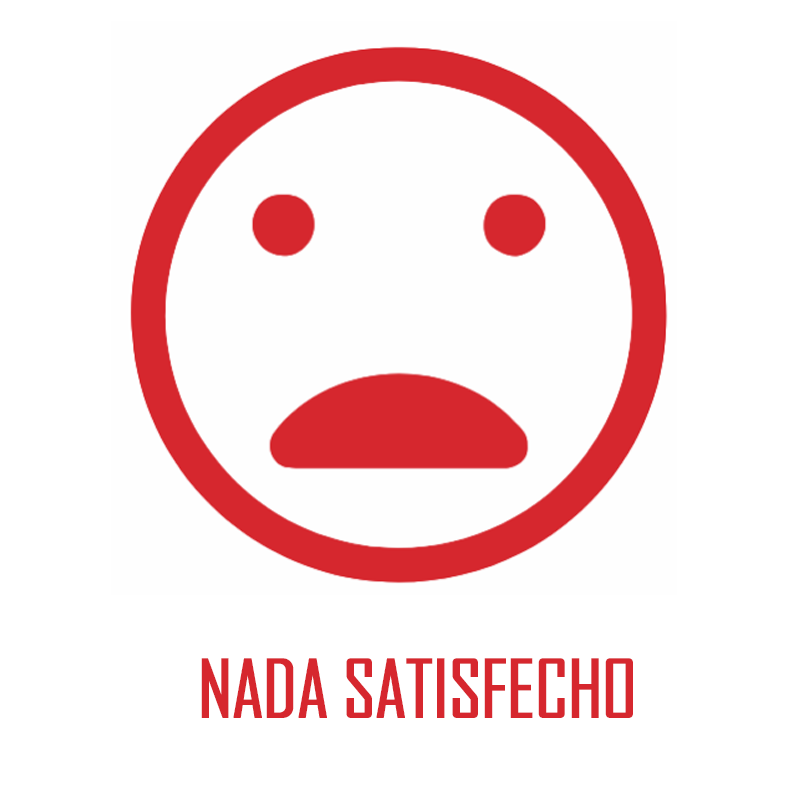
<style>
.page{position:relative;width:800px;height:800px;background:#ffffff}
.page>*{position:absolute;margin:0}
.t1{font:76.7px "AgencyFB-Reg";letter-spacing:-0.025em;color:#d6272e;font-weight:bold}
</style>
<div class="page">
<p class="t1" style="left:201px;top:658px;width:432px;height:60px">NADA SATISFECHO</p>
</div>
